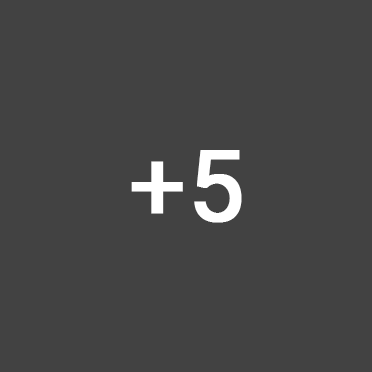
<style>
.page{position:relative;width:372px;height:372px;background:#424242}
.page>*{position:absolute;margin:0}
.t1{font:99px "Roboto-Regular";color:#ffffff;font-weight:bold}
</style>
<div class="page">
<p class="t1" style="left:131px;top:150px;width:111px;height:73px">+5</p>
</div>
